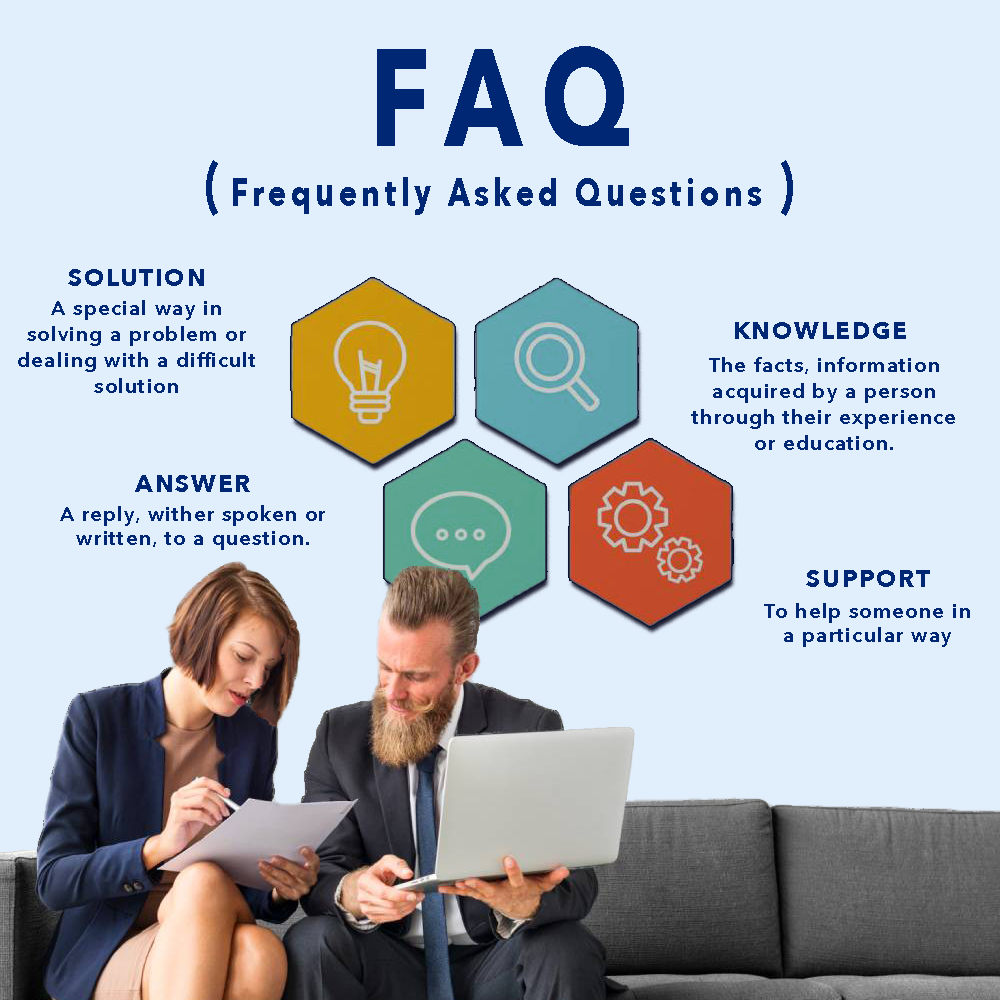
<style>
.page{position:relative;width:1000px;height:1000px;background:#e1eefb}
.page>*{position:absolute;margin:0}
.t1{font:136.5px "AvenirNext-Bold";letter-spacing:0.2em;color:#002774;scale:0.77 1}
.t2{font:39px "AvenirNext-Bold";letter-spacing:0.1em;color:#002774;scale:0.77 1}
.t3{font:62.4px "AvenirNext-Bold";letter-spacing:0.2em;color:#002774;scale:0.77 1}
.t4{font:24px "AvenirNext-Bold";letter-spacing:0.075em;color:#002774}
.t5{font:20px/26px "AvenirNext-DemiBold";letter-spacing:0.075em;color:#002774}
.t6{font:20px/24px "AvenirNext-DemiBold";letter-spacing:0.075em;color:#002774}
</style>
<div class="page">
<p class="t1" style="left:377px;top:46px;width:252px;height:100px">FAQ</p>
<p class="t2" style="left:206px;top:160px;width:587px;height:56px"><span class="t3">(</span>Frequently Asked Questions <span class="t3">)</span></p>
<p class="t4" style="left:68px;top:269px;width:136px;height:17px">SOLUTION</p>
<p class="t5" style="left:18px;top:300px;width:237px;height:93px;text-align:center">A special way in solving a problem or dealing with a difficult solution</p>
<p class="t4" style="left:735px;top:322px;width:171px;height:17px">KNOWLEDGE</p>
<p class="t5" style="left:691px;top:357px;width:264px;height:93px;text-align:center">The facts, information acquired by a person through their experience or education.</p>
<p class="t4" style="left:135px;top:475px;width:115px;height:17px">ANSWER</p>
<p class="t6" style="left:60px;top:505px;width:265px;height:45px;text-align:center">A reply, wither spoken or written, to a question.</p>
<p class="t4" style="left:806px;top:570px;width:124px;height:17px">SUPPORT</p>
<p class="t6" style="left:764px;top:603px;width:206px;height:44px;text-align:center">To help someone in a particular way</p>
</div>
